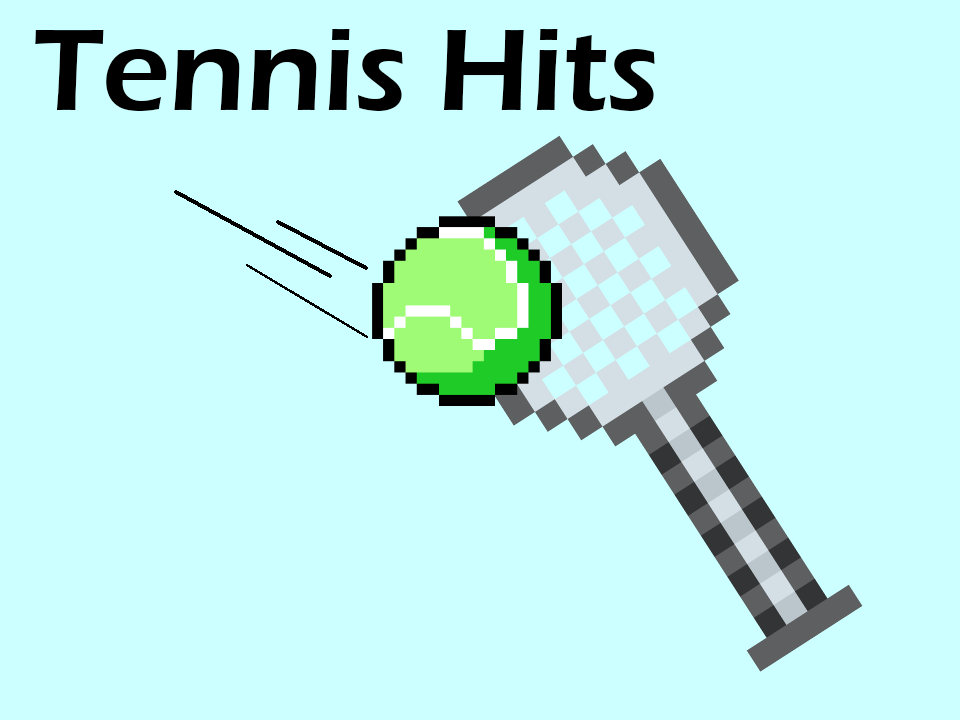
<style>
.page{position:relative;width:960px;height:720px;background:#ccffff}
.page>*{position:absolute;margin:0}
.t1{font:120px "ErasITC-Demi";color:#000000}
</style>
<div class="page">
<p class="t1" style="left:35px;top:29px;width:620px;height:82px">Tennis Hits</p>
</div>
